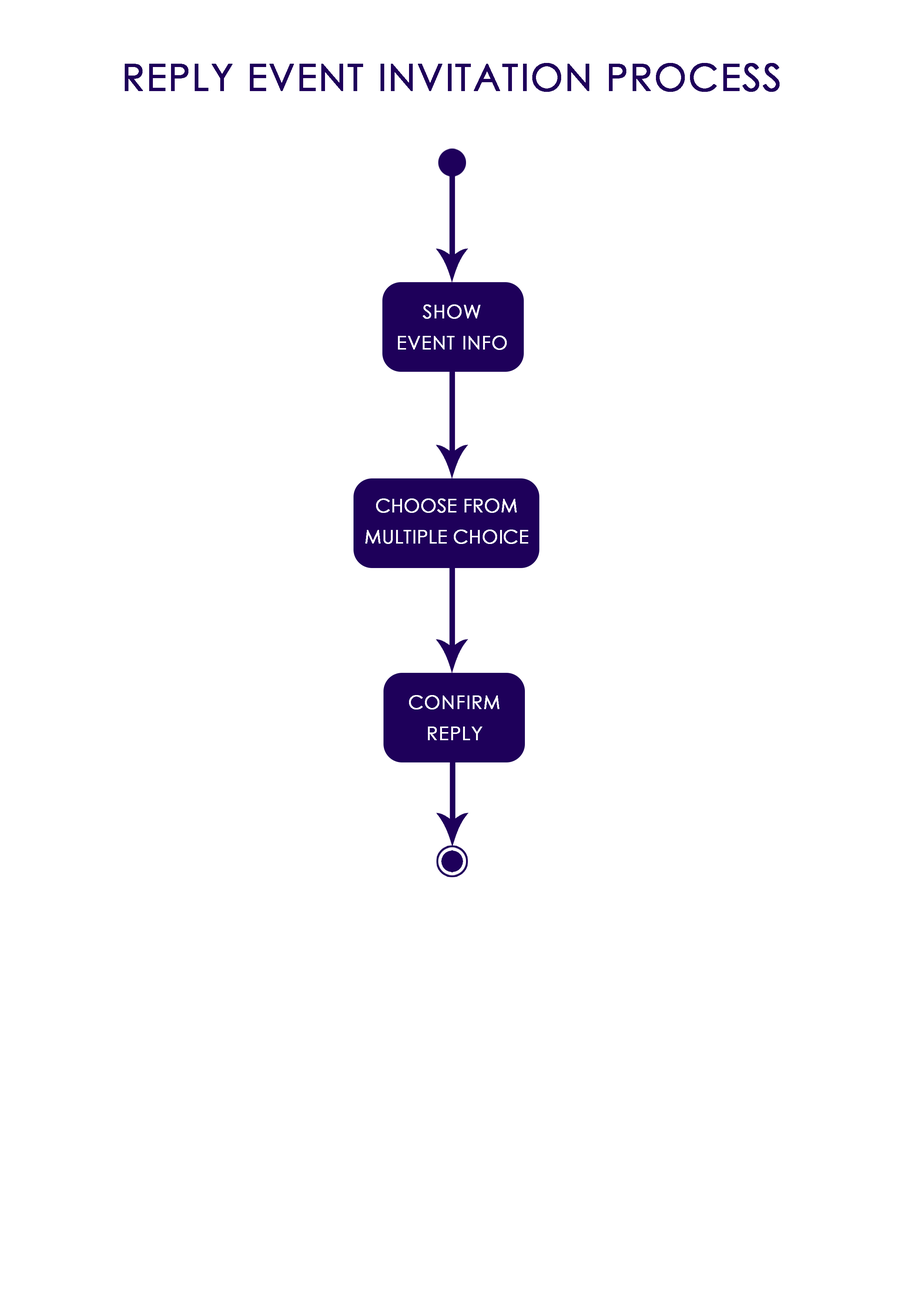
<style>
.page{position:relative;width:918px;height:1299px;background:#ffffff}
.page>*{position:absolute;margin:0}
.t1{font:37px "CenturyGothic";letter-spacing:0.025em;color:#1e005a;text-transform:uppercase;font-weight:bold}
.t2{font:18.5px/30.9px "CenturyGothic";letter-spacing:0.025em;color:#ffffff;text-transform:uppercase;font-weight:bold}
.t3{font:18.5px/30.9px "CenturyGothic";color:#ffffff;text-transform:uppercase;font-weight:bold}
</style>
<div class="page">
<p class="t1" style="left:125px;top:63px;width:655px;height:29px">reply event invitation process</p>
<p class="t2" style="left:398px;top:304px;width:109px;height:46px;text-align:center">show event info</p>
<p class="t3" style="left:365px;top:498px;width:163px;height:46px;text-align:center">choose from multiple choice</p>
<p class="t2" style="left:409px;top:695px;width:90px;height:45px;text-align:center">confirm reply</p>
</div>
